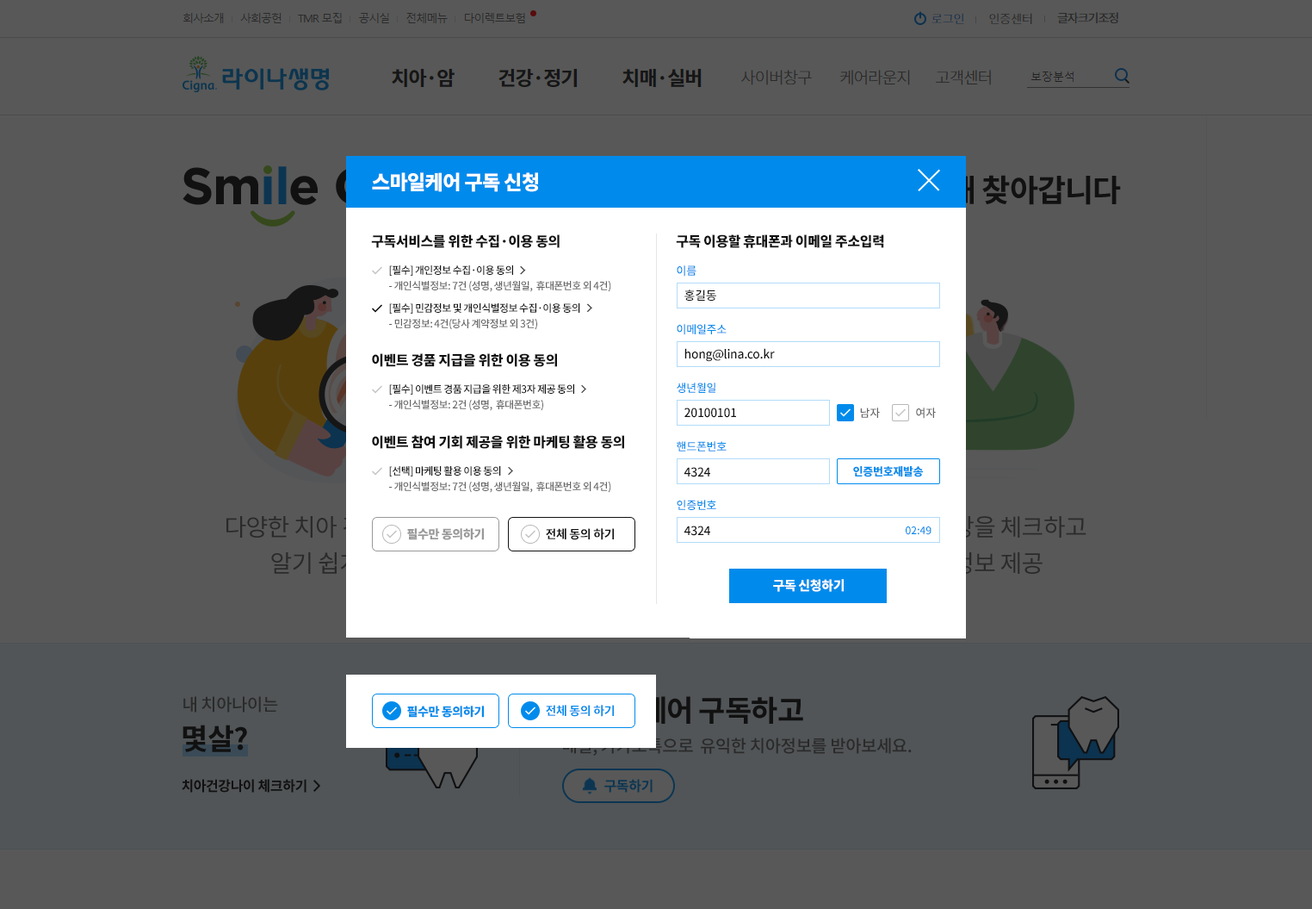
<style>
.page{position:relative;width:1312px;height:909px;background:#585858}
.page>*{position:absolute;margin:0}
.t1{font:19.8px "NotoSansCJKkr-Black";letter-spacing:-0.025em;color:#ffffff}
.t2{font:13.8px "NotoSansCJKkr-Black";letter-spacing:-0.025em;color:#111111}
.t3{font:10.3px/15.5px "NotoSansCJKkr-Medium";letter-spacing:-0.05em;color:#666666}
.t4{font:10.3px/22.4px "NotoSansCJKkr-Medium";letter-spacing:-0.05em;color:#111111}
.t5{font:11.2px/58.6px "NotoSansCJKkr-Medium";letter-spacing:-0.025em;color:#008bec}
.t6{font:12.1px "NotoSansCJKkr-Medium";letter-spacing:-0.025em;color:#111111}
.t7{font:11.2px "NotoSansCJKkr-Medium";letter-spacing:-0.025em;color:#666666}
.t8{font:11.2px "NotoSansCJKkr-Black";letter-spacing:-0.025em;color:#008bec}
.t9{font:12.1px "NotoSansCJKkr-Black";letter-spacing:-0.025em;color:#999999}
.t10{font:12.1px "NotoSansCJKkr-Bold";letter-spacing:-0.025em;color:#111111}
.t11{font:10.3px "NotoSansCJKkr-Medium";letter-spacing:-0.01em;color:#008bec}
.t12{font:12.9px "NotoSansCJKkr-Black";letter-spacing:-0.025em;color:#ffffff}
.t13{font:12.1px "NotoSansCJKkr-Black";letter-spacing:-0.025em;color:#008bec}
.t14{font:12.1px "NotoSansCJKkr-Bold";letter-spacing:-0.025em;color:#008bec}
</style>
<div class="page">
<p class="t1" style="left:372px;top:172px;width:166px;height:20px">스마일케어 구독 신청</p>
<p class="t2" style="left:371px;top:234px;width:189px;height:14px">구독서비스를 위한 수집·이용 동의</p>
<p class="t2" style="left:676px;top:234px;width:208px;height:14px">구독 이용할 휴대폰과 이메일 주소입력</p>
<p class="t3" style="left:389px;top:265px;width:222px;height:65px"><span class="t4">[필수] 개인정보 수집·이용 동의<br></span>- 개인식별정보: 7건 (성명, 생년월일,  휴대폰번호 외 4건)<br><span class="t4">[필수] 민감정보 및 개인식별정보 수집·이용 동의<br></span>- 민감정보: 4건(당사 계약정보 외 3건)</p>
<p class="t5" style="left:677px;top:265px;width:50px;height:245px">이름<br>이메일주소<br>생년월일<br>핸드폰번호<br>인증번호</p>
<p class="t6" style="left:685px;top:289px;width:32px;height:12px">홍길동</p>
<p class="t2" style="left:372px;top:353px;width:185px;height:14px">이벤트 경품 지급을 위한 이용 동의</p>
<p class="t6" style="left:685px;top:348px;width:90px;height:14px">hong@lina.co.kr</p>
<p class="t4" style="left:389px;top:384px;width:185px;height:27px">[필수] 이벤트 경품 지급을 위한 제3자 제공 동의<br><span class="t3">- 개인식별정보: 2건 (성명,  휴대폰번호)</span></p>
<p class="t6" style="left:685px;top:407px;width:51px;height:11px">20100101</p>
<p class="t7" style="left:860px;top:407px;width:76px;height:12px">남자                여자</p>
<p class="t2" style="left:372px;top:435px;width:252px;height:14px">이벤트 참여 기회 제공을 위한 마케팅 활용 동의</p>
<p class="t3" style="left:389px;top:466px;width:222px;height:27px"><span class="t4">[선택] 마케팅 활용 이용 동의<br></span>- 개인식별정보: 7건 (성명, 생년월일,  휴대폰번호 외 4건)</p>
<p class="t6" style="left:684px;top:467px;width:26px;height:10px">4324</p>
<p class="t8" style="left:853px;top:466px;width:70px;height:11px">인증번호재발송</p>
<p class="t9" style="left:407px;top:528px;width:77px;height:12px">필수만 동의하기</p>
<p class="t10" style="left:546px;top:528px;width:68px;height:12px">전체 동의 하기</p>
<p class="t6" style="left:684px;top:525px;width:26px;height:11px">4324</p>
<p class="t11" style="left:906px;top:526px;width:26px;height:9px">02:49</p>
<p class="t12" style="left:773px;top:579px;width:71px;height:13px">구독 신청하기</p>
<p class="t13" style="left:407px;top:705px;width:77px;height:12px">필수만 동의하기</p>
<p class="t14" style="left:546px;top:704px;width:68px;height:13px">전체 동의 하기</p>
</div>
